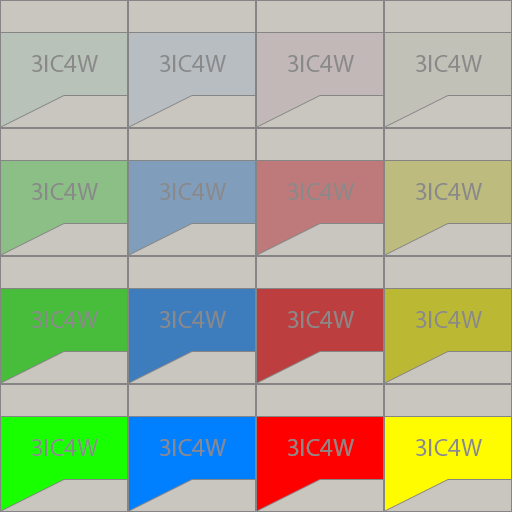
<style>
.page{position:relative;width:512px;height:512px;background:#c8c6bf}
.page>*{position:absolute;margin:0}
.t1{font:25px "MyriadPro-Regular";color:#898989}
</style>
<div class="page">
<p class="t1" style="left:32px;top:55px;width:66px;height:17px">3IC4W</p>
<p class="t1" style="left:160px;top:55px;width:66px;height:17px">3IC4W</p>
<p class="t1" style="left:288px;top:55px;width:66px;height:17px">3IC4W</p>
<p class="t1" style="left:416px;top:55px;width:66px;height:17px">3IC4W</p>
<p class="t1" style="left:32px;top:183px;width:66px;height:17px">3IC4W</p>
<p class="t1" style="left:160px;top:183px;width:66px;height:17px">3IC4W</p>
<p class="t1" style="left:288px;top:183px;width:66px;height:17px">3IC4W</p>
<p class="t1" style="left:416px;top:183px;width:66px;height:17px">3IC4W</p>
<p class="t1" style="left:32px;top:311px;width:66px;height:17px">3IC4W</p>
<p class="t1" style="left:160px;top:311px;width:66px;height:17px">3IC4W</p>
<p class="t1" style="left:288px;top:311px;width:66px;height:17px">3IC4W</p>
<p class="t1" style="left:416px;top:311px;width:66px;height:17px">3IC4W</p>
<p class="t1" style="left:32px;top:439px;width:66px;height:17px">3IC4W</p>
<p class="t1" style="left:160px;top:439px;width:66px;height:17px">3IC4W</p>
<p class="t1" style="left:288px;top:439px;width:66px;height:17px">3IC4W</p>
<p class="t1" style="left:416px;top:439px;width:66px;height:17px">3IC4W</p>
</div>
